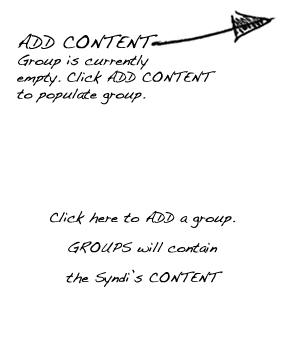
<style>
.page{position:relative;width:290px;height:338px;background:#ffffff}
.page>*{position:absolute;margin:0}
.t1{font:14px "Handwriting-Dakota";color:#000000}
.t2{font:18px "Handwriting-Dakota";color:#000000}
.t3{font:14px/30px "Handwriting-Dakota";color:#000000}
</style>
<div class="page">
<p class="t1" style="left:17px;top:33px;width:199px;height:72px"><span class="t2">ADD CONTENT<br></span>Group is currently <br>empty. Click ADD CONTENT<br>to populate group.</p>
<p class="t3" style="left:50px;top:210px;width:186px;height:77px;text-align:center">Click here to ADD a group.<br>GROUPS will contain<br>the Syndi’s CONTENT</p>
</div>
